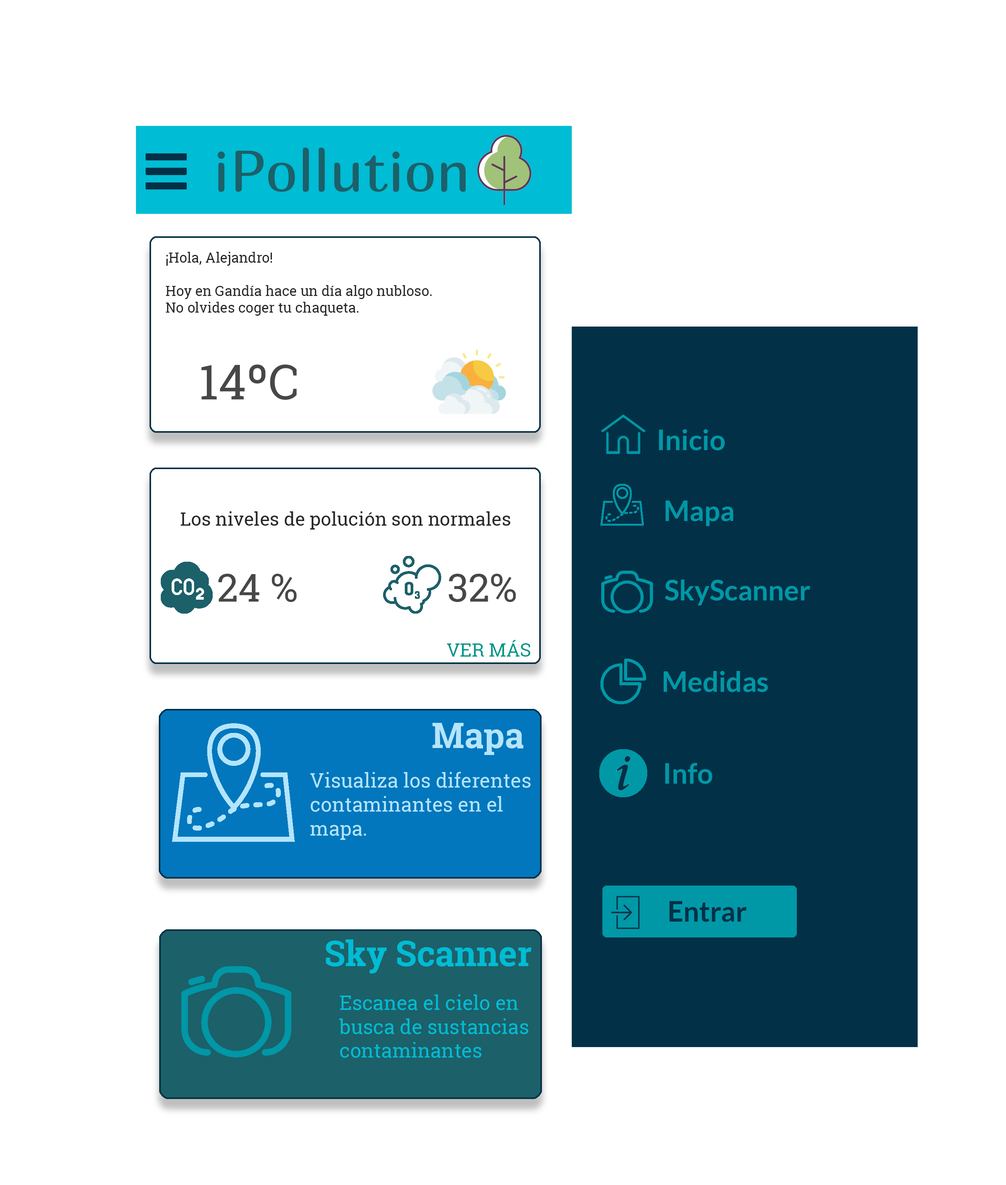
<style>
.page{position:relative;width:1006px;height:1185px;background:#ffffff}
.page>*{position:absolute;margin:0}
.t1{font:58.1px "Marmelad-Regular";color:#1c6069}
.t2{font:13.9px "RobotoSlab-Regular";color:#272727}
.t3{font:48px "RobotoSlab-Regular";color:#474747}
.t4{font:27.9px "Lato-Bold";color:#0098a6}
.t5{font:18.6px "RobotoSlab-Regular";color:#272727}
.t6{font:38.7px "RobotoSlab-Regular";color:#474747}
.t7{font:18.6px "RobotoSlab-Regular";color:#009688}
.t8{font:34.9px "RobotoSlab-Bold";color:#b3e5fc}
.t9{font:19.9px "RobotoSlab-Regular";color:#b3e5fc}
.t10{font:27.9px "Lato-Bold";color:#023047}
.t11{font:34.9px "RobotoSlab-Bold";color:#00bcd4}
.t12{font:19.9px "RobotoSlab-Regular";color:#00bcd4}
</style>
<div class="page">
<p class="t1" style="left:217px;top:148px;width:249px;height:44px">iPollution</p>
<p class="t2" style="left:166px;top:252px;width:266px;height:64px">¡Hola, Alejandro!<br><br>Hoy en Gandía hace un día algo nubloso.<br>No olvides coger tu chaqueta.</p>
<p class="t3" style="left:201px;top:365px;width:96px;height:35px">14ºC</p>
<p class="t4" style="left:659px;top:429px;width:66px;height:22px">Inicio</p>
<p class="t4" style="left:666px;top:501px;width:67px;height:25px">Mapa</p>
<p class="t5" style="left:181px;top:511px;width:330px;height:19px">Los niveles de polución son normales</p>
<p class="t6" style="left:218px;top:574px;width:79px;height:28px">24 %</p>
<p class="t6" style="left:449px;top:574px;width:67px;height:28px">32%</p>
<p class="t4" style="left:665px;top:580px;width:145px;height:26px">SkyScanner</p>
<p class="t7" style="left:447px;top:640px;width:83px;height:17px">VER MÁS</p>
<p class="t4" style="left:664px;top:671px;width:104px;height:21px">Medidas</p>
<p class="t8" style="left:432px;top:723px;width:91px;height:32px">Mapa</p>
<p class="t9" style="left:310px;top:772px;width:221px;height:68px">Visualiza los diferentes <br>contaminantes en el <br>mapa.</p>
<p class="t4" style="left:665px;top:763px;width:47px;height:21px">Info</p>
<p class="t10" style="left:669px;top:901px;width:78px;height:21px">Entrar</p>
<p class="t11" style="left:326px;top:940px;width:206px;height:34px">Sky Scanner</p>
<p class="t12" style="left:339px;top:995px;width:189px;height:63px">Escanea el cielo en<br>busca de sustancias<br>contaminantes</p>
</div>
